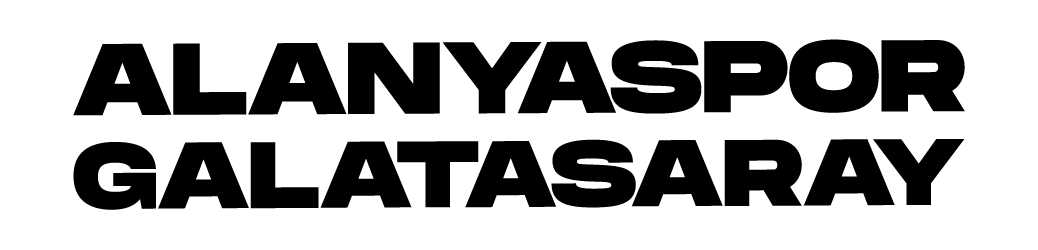
<style>
.page{position:relative;width:1038px;height:250px;background:#ffffff}
.page>*{position:absolute;margin:0}
.t1{font:90.9px/131px "MonumentExtended-Ultrabold";color:#000000}
</style>
<div class="page">
<p class="t1" style="left:73px;top:39px;width:892px;height:171px;text-align:center">ALANYASPOR<br>GALATASARAY</p>
</div>
